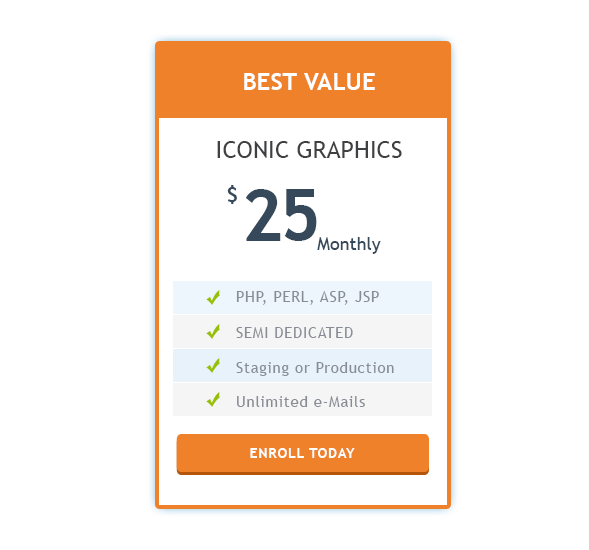
<style>
.page{position:relative;width:589px;height:550px;background:#ffffff}
.page>*{position:absolute;margin:0}
.t1{font:24px/68px "TrebuchetMS";color:#3f4042;text-transform:uppercase}
.t2{font:24px/68px "TrebuchetMS-Bold";color:#ffffff;text-transform:uppercase}
.t3{font:36px "TrebuchetMS-Bold";letter-spacing:-0.05em;color:#35495a;text-transform:uppercase}
.t4{font:72px "TrebuchetMS-Bold";letter-spacing:-0.05em;color:#35495a;text-transform:uppercase}
.t5{font:18px "TrebuchetMS";color:#35495a}
.t6{font:15px "TrebuchetMS";letter-spacing:0.05em;color:#888c94}
.t7{font:14px "TrebuchetMS-Bold";letter-spacing:0.05em;color:#ffffff;text-transform:uppercase}
</style>
<div class="page">
<p class="t1" style="left:217px;top:73px;width:185px;height:85px;text-align:center"><span class="t2">Best Value<br></span>Iconic Graphics</p>
<p class="t3" style="left:227px;top:185px;width:10px;height:19px">$</p>
<p class="t4" style="left:246px;top:189px;width:71px;height:52px">25</p>
<p class="t5" style="left:317px;top:237px;width:64px;height:17px">Monthly</p>
<p class="t6" style="left:236px;top:291px;width:143px;height:14px">PHP, PERL, ASP, JSP</p>
<p class="t6" style="left:236px;top:327px;width:117px;height:11px">SEMI DEDICATED</p>
<p class="t6" style="left:236px;top:362px;width:158px;height:14px">Staging or Production</p>
<p class="t6" style="left:237px;top:396px;width:128px;height:11px">Unlimited e-Mails</p>
<p class="t7" style="left:250px;top:448px;width:105px;height:10px">Enroll Today</p>
</div>
